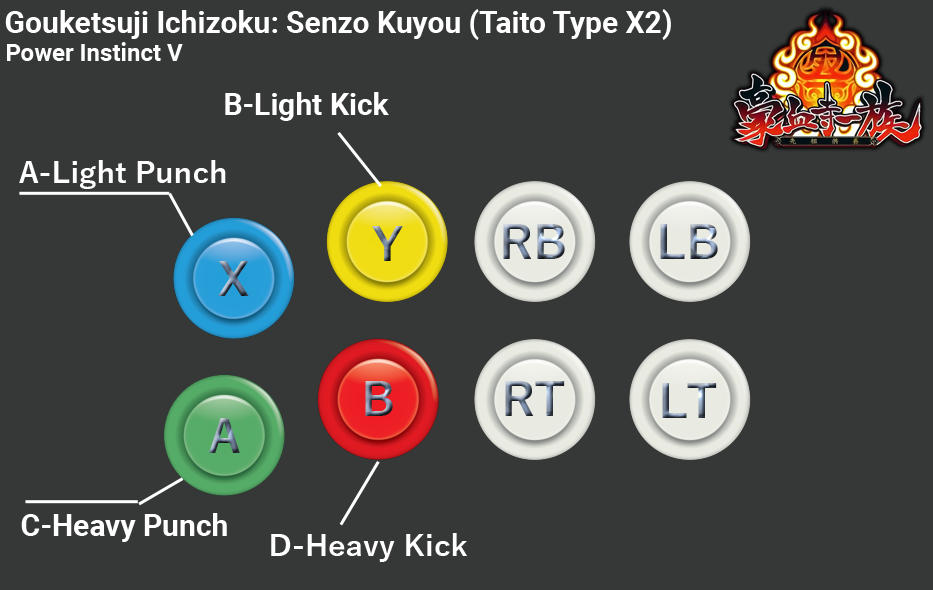
<style>
.page{position:relative;width:933px;height:590px;background:#363838}
.page>*{position:absolute;margin:0}
.t1{font:30px "Roboto-Bold";color:#ffffff}
.t2{font:24px "Roboto-Bold";color:#ffffff}
.t3{font:30px "YuGothic-Bold";color:#ffffff}
</style>
<div class="page">
<p class="t1" style="left:5px;top:9px;width:666px;height:31px">Gouketsuji Ichizoku: Senzo Kuyou (Taito Type X2)</p>
<p class="t2" style="left:7px;top:42px;width:176px;height:19px">Power Instinct V</p>
<p class="t1" style="left:225px;top:92px;width:164px;height:29px">B-Light Kick</p>
<p class="t3" style="left:19px;top:160px;width:207px;height:29px">A-Light Punch</p>
<p class="t1" style="left:21px;top:513px;width:206px;height:29px">C-Heavy Punch</p>
<p class="t3" style="left:271px;top:533px;width:196px;height:29px">D-Heavy Kick</p>
</div>
